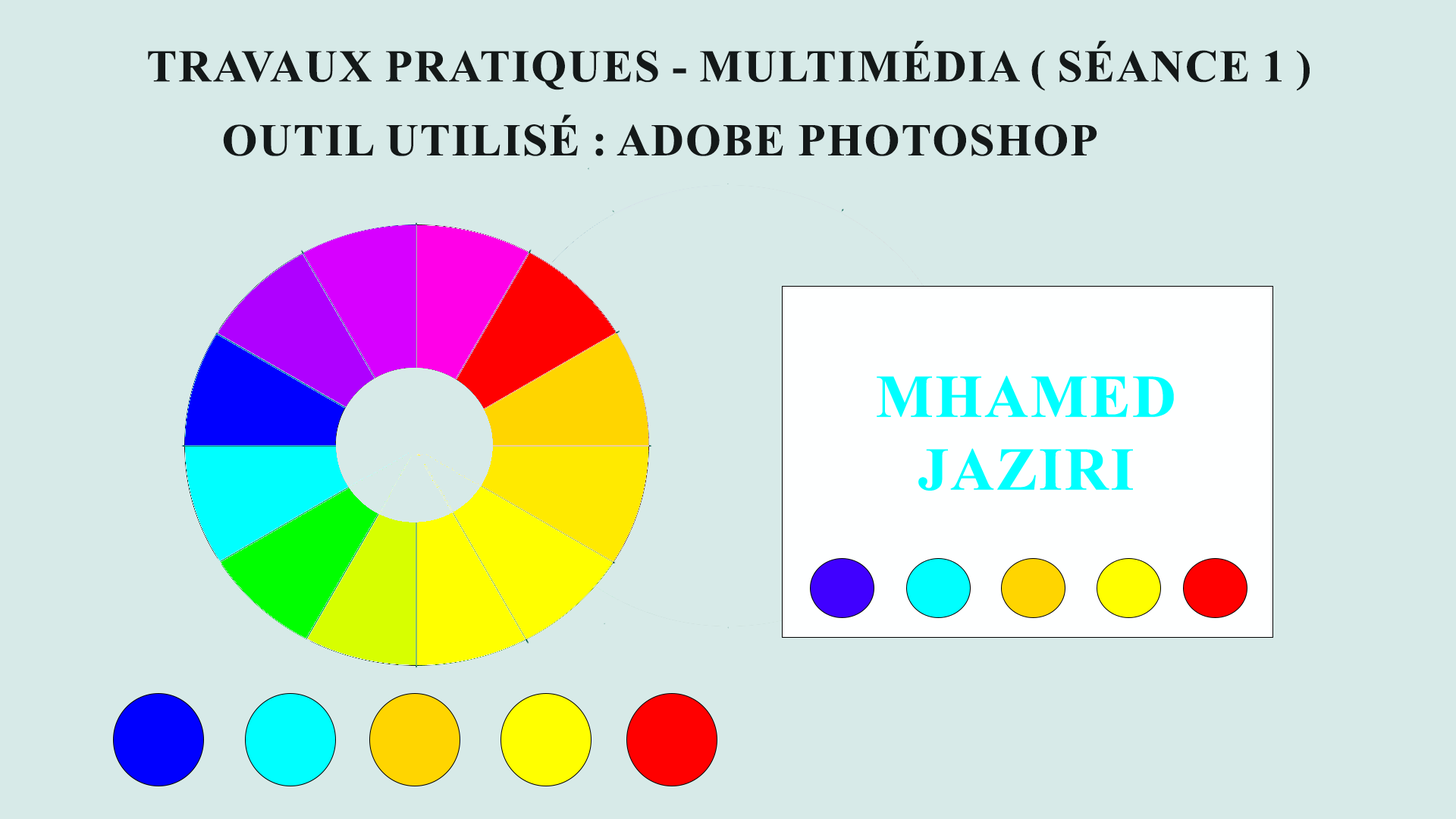
<style>
.page{position:relative;width:1456px;height:819px;background:#d7eae8}
.page>*{position:absolute;margin:0}
.t1{font:45.5px "TimesNewRomanPS-BoldMT";color:#141919;text-transform:uppercase}
</style>
<div class="page">
<p class="t1" style="left:148px;top:40px;width:1162px;height:51px">Travaux Pratiques - Multimédia ( séance 1 )</p>
<p class="t1" style="left:223px;top:115px;width:874px;height:41px">Outil utilisé : Adobe photoshop</p>
</div>
